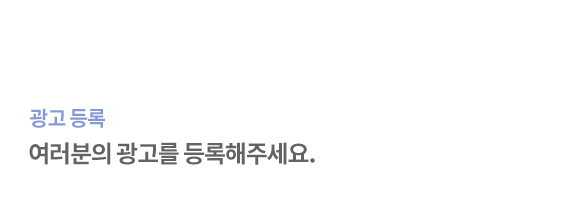
<style>
.page{position:relative;width:570px;height:200px;background:#ffffff}
.page>*{position:absolute;margin:0}
.t1{font:20.8px "NotoSansCJKkr-Bold";letter-spacing:-0.05em;color:#8499d5}
.t2{font:24px "NotoSansCJKkr-Bold";letter-spacing:-0.05em;color:#636363}
</style>
<div class="page">
<p class="t1" style="left:30px;top:108px;width:75px;height:20px">광고 등록</p>
<p class="t2" style="left:29px;top:142px;width:286px;height:23px">여러분의 광고를 등록해주세요.</p>
</div>
